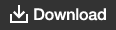
<style>
.page{position:relative;width:116px;height:30px;background:#333333}
.page>*{position:absolute;margin:0}
.t1{font:16px "HelveticaNeue-Medium";letter-spacing:-0.01em;color:#ffffff}
</style>
<div class="page">
<p class="t1" style="left:34px;top:8px;width:72px;height:13px">Download</p>
</div>
